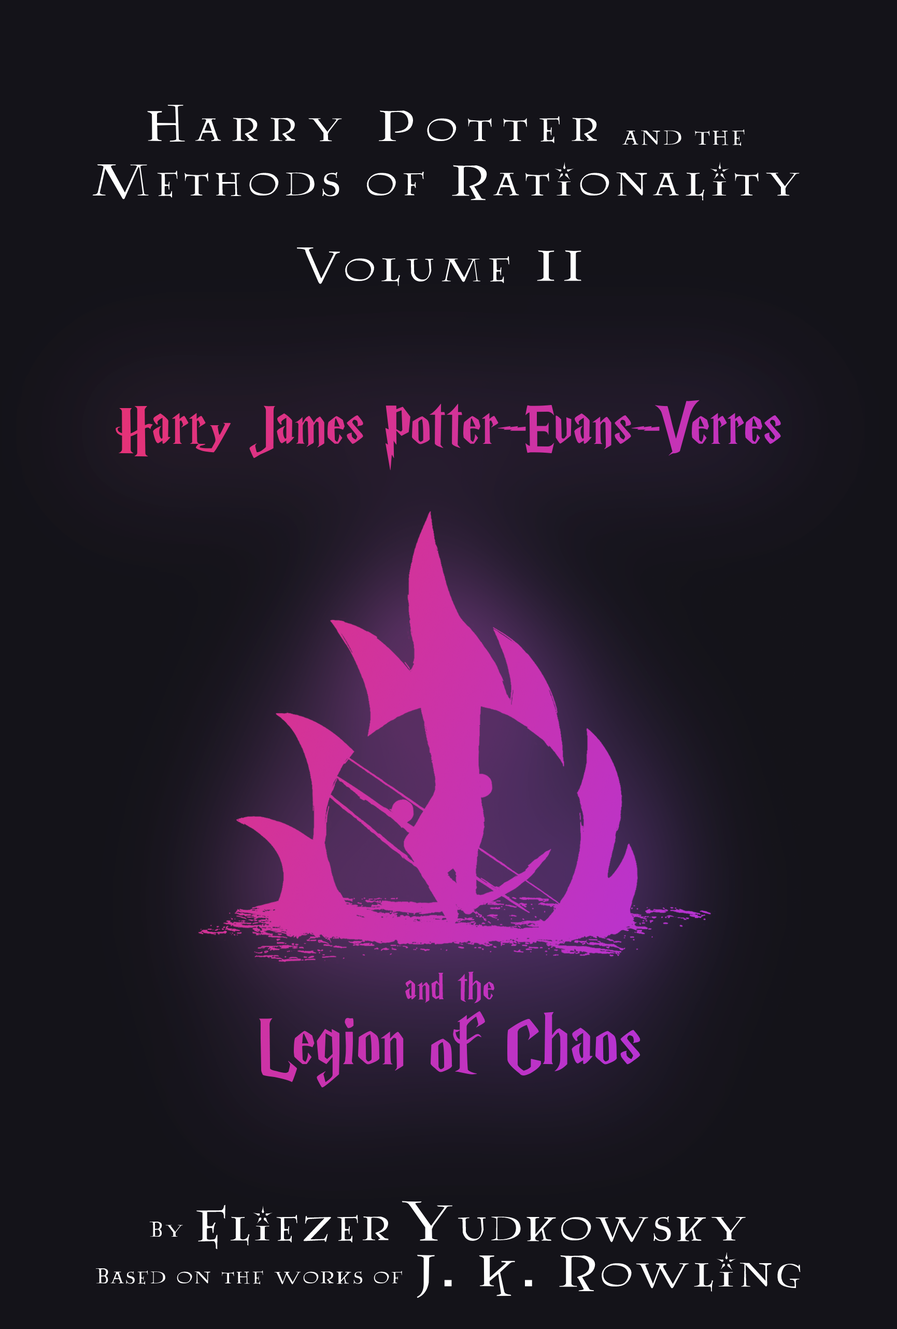
<style>
.page{position:relative;width:897px;height:1329px;background:#141319}
.page>*{position:absolute;margin:0}
.t1{font:50.3px/54.5px "Lumos";letter-spacing:0.1em;color:#ffffff}
.t2{font:50.3px/35.7px "Lumos";letter-spacing:0.2em;color:#ffffff}
.t3{font:31.1px/35.7px "Lumos";letter-spacing:0.05em;color:#ffffff}
.t4{font:50.3px "Lumos";letter-spacing:0.1em;color:#ffffff}
.t5{font:64.8px/77.8px "HarryPotterRussianVersionofGfdtk";letter-spacing:0.025em}
.t6{font:41.5px/77.8px "HarryPotterRussianVersionofGfdtk";letter-spacing:0.025em}
.t7{font:77.8px/77.8px "HarryPotterRussianVersionofGfdtk";letter-spacing:0.025em}
.t8{font:25.9px/46.1px "Lumos";letter-spacing:0.05em;color:#ffffff}
.t9{font:51.8px/46.1px "Lumos";letter-spacing:0.05em;color:#ffffff}
</style>
<div class="page">
<p class="t1" style="left:92px;top:105px;width:708px;height:96px;text-align:center"><span class="t2">Harry Potter  </span><span class="t3">and the<br></span>Methods of Rationality</p>
<p class="t4" style="left:297px;top:247px;width:285px;height:39px">Volume II</p>
<p class="t5" style="left:116px;top:400px;width:665px;height:687px;text-align:center">Harry James Potter-Evans-Verres<br><br><br><br><br><br><br><span class="t6">and the<br></span><span class="t7">Legion of Chaos</span></p>
<p class="t8" style="left:95px;top:1201px;width:706px;height:97px;text-align:center">By <span class="t9">Eliezer Yudkowsky<br></span>Based on the works of <span class="t9">J. K. Rowling</span></p>
</div>
